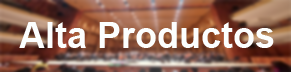
<style>
.page{position:relative;width:291px;height:72px}
.page>*{position:absolute;margin:0}
.t1{font:36px "Arial-BoldMT";color:#fcfefe}
</style>
<div class="page">
<p class="t1" style="left:19px;top:22px;width:255px;height:26px">Alta Productos</p>
</div>
